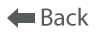
<style>
.page{position:relative;width:102px;height:35px;background:#ffffff}
.page>*{position:absolute;margin:0}
.t1{font:25px "MyriadPro-Regular";color:#585b5c}
</style>
<div class="page">
<p class="t1" style="left:41px;top:7px;width:48px;height:19px">Back</p>
</div>
